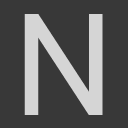
<style>
.page{position:relative;width:128px;height:128px;background:#383838}
.page>*{position:absolute;margin:0}
.t1{font:141.7px "Roboto-Regular";color:#d5d5d5}
</style>
<div class="page">
<p class="t1" style="left:24px;top:14px;width:79px;height:101px">N</p>
</div>
